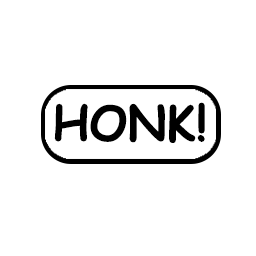
<style>
.page{position:relative;width:256px;height:256px;background:#ffffff}
.page>*{position:absolute;margin:0}
.t1{font:48px "ComicSansMS-Bold";color:#000000}
</style>
<div class="page">
<p class="t1" style="left:54px;top:102px;width:151px;height:41px">HONK!</p>
</div>
